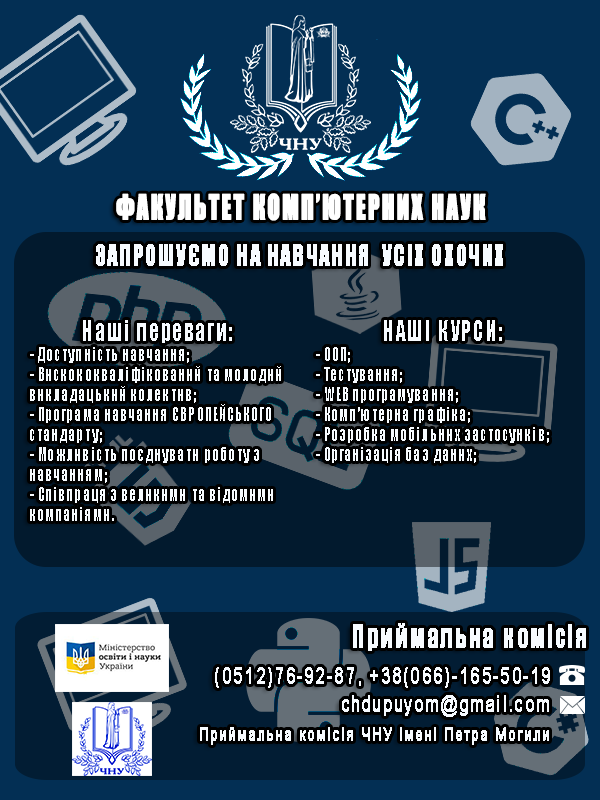
<style>
.page{position:relative;width:600px;height:800px;background:#032f54}
.page>*{position:absolute;margin:0}
.t1{font:32px "Impact";letter-spacing:0.08em;color:#ffffff;font-weight:bold;scale:0.71 1}
.t2{font:26.9px "Impact";letter-spacing:0.08em;color:#f7fbff;font-weight:bold;scale:0.71 1}
.t3{font:18px/20px "Impact";letter-spacing:0.08em;color:#f7fbff;scale:0.74 1}
.t4{font:27px/20px "Impact";letter-spacing:0.08em;color:#f7fbff;scale:0.74 1}
.t5{font:29px "Impact";letter-spacing:0.08em;color:#f7fbff;font-weight:bold;scale:0.74 1}
.t6{font:22px "ArialMT";letter-spacing:0.08em;color:#f7fbff;font-weight:bold;scale:0.74 1}
.t7{font:18px "ArialMT";letter-spacing:0.08em;color:#f7fbff;font-weight:bold;scale:0.7 1}
</style>
<div class="page">
<p class="t1" style="left:116px;top:193px;width:370px;height:28px">ФАКУЛЬТЕТ КОМП’ЮТЕРНИХ НАУК</p>
<p class="t2" style="left:96px;top:244px;width:407px;height:22px">ЗАПРОШУЄМО НА НАВЧАННЯ  УСІХ ОХОЧИХ</p>
<p class="t3" style="left:30px;top:320px;width:251px;height:201px;text-align:justify"><span class="t4">Наші переваги:<br></span>- Доступність навчання;<br>- Вискококваліфікований та молодий викладацький колектив;<br>- Програма навчання ЄВРОПЕЙСЬКОГО стандарту;<br>- Можливість поєднувати роботу з навчанням;<br>- Співпраця з великими та відомими компаніями.</p>
<p class="t3" style="left:316px;top:320px;width:233px;height:143px;text-align:justify"><span class="t4">НАШІ КУРСИ:<br></span>- ООП;<br>- Тестування;<br>- WEB програмування;<br>- Комп’ютерна графіка;<br>- Розробка мобільних застосунків;<br>- Організація баз даних;</p>
<p class="t5" style="left:353px;top:623px;width:233px;height:28px">Приймальна комісія</p>
<p class="t6" style="left:215px;top:667px;width:335px;height:21px">(0512)76-92-87, +38(066)-165-50-19</p>
<p class="t6" style="left:342px;top:695px;width:207px;height:22px">chdupuyom@gmail.com</p>
<p class="t7" style="left:200px;top:727px;width:349px;height:18px">Приймальна комісія ЧНУ імені Петра Могили</p>
</div>
